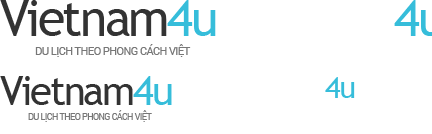
<style>
.page{position:relative;width:432px;height:134px;background:#ffffff}
.page>*{position:absolute;margin:0}
.t1{font:50px "TrebuchetMS";letter-spacing:-0.05em;color:#333333}
.t2{font:50px "TrebuchetMS";letter-spacing:-0.05em;color:#36bdda}
.t3{font:11px "Roboto-Regular";letter-spacing:-0.05em;color:#777777}
.t4{font:39.7px "TrebuchetMS";letter-spacing:-0.05em;color:#333333}
.t5{font:39.7px "TrebuchetMS";letter-spacing:-0.05em;color:#36bdda}
.t6{font:30px "TrebuchetMS";letter-spacing:-0.05em;color:#ffffff}
.t7{font:30px "TrebuchetMS";letter-spacing:-0.05em;color:#36bdda}
.t8{font:8.7px "Roboto-Regular";letter-spacing:-0.05em;color:#777777}
</style>
<div class="page">
<p class="t1" style="left:0px;top:0px;width:216px;height:36px">Vietnam<span class="t2">4u</span></p>
<p class="t3" style="left:35px;top:44px;width:156px;height:13px">DU LỊCH THEO PHONG CÁCH VIỆT</p>
<p class="t4" style="left:0px;top:76px;width:172px;height:29px">Vietnam<span class="t5">4u</span></p>
<p class="t6" style="left:224px;top:77px;width:131px;height:21px">Vietnam<span class="t7">4u</span></p>
<p class="t8" style="left:28px;top:110px;width:124px;height:12px">DU LỊCH THEO PHONG CÁCH VIỆT</p>
</div>
